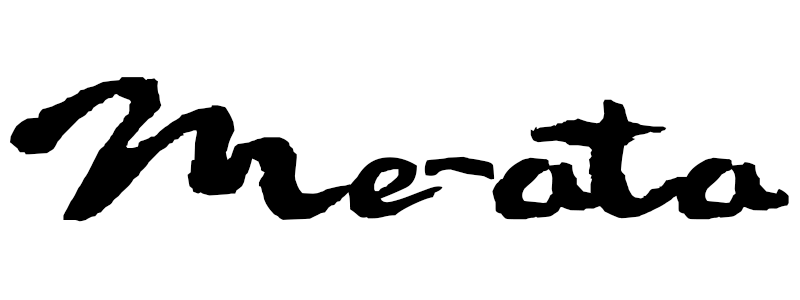
<style>
.page{position:relative;width:800px;height:300px;background:#ffffff}
.page>*{position:absolute;margin:0}
.t1{font:350px "Miata";letter-spacing:-0.105em;color:#000000}
</style>
<div class="page">
<p class="t1" style="left:9px;top:77px;width:780px;height:145px">Me-ata</p>
</div>
